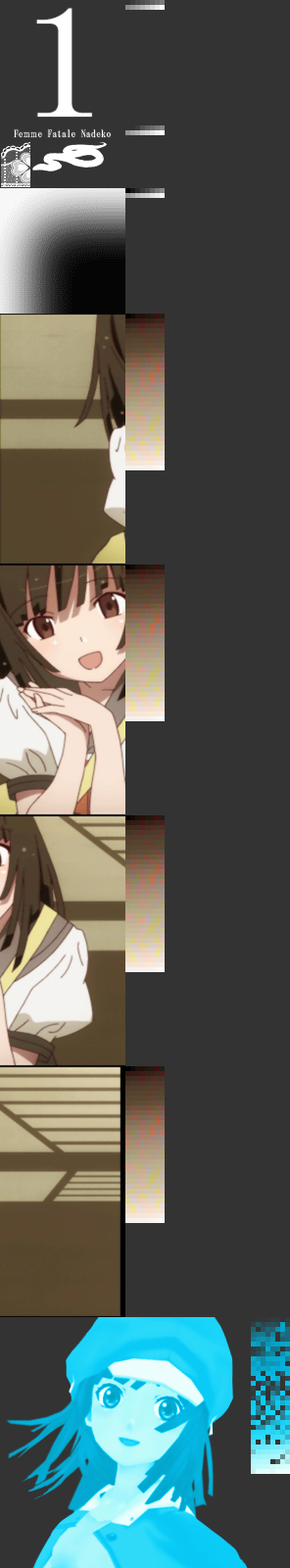
<style>
.page{position:relative;width:290px;height:1568px;background:#333333}
.page>*{position:absolute;margin:0}
.t1{font:147px "HGMinchoB";letter-spacing:0.01em;color:#ffffff}
.t2{font:9.8px "HGMinchoB";letter-spacing:0.01em;color:#ffffff}
.t3{font:9.8px "HGMinchoB";letter-spacing:0.075em;color:#ffffff;scale:0.7 1}
</style>
<div class="page">
<p class="t1" style="left:36px;top:8px;width:56px;height:109px">1</p>
<p class="t2" style="left:14px;top:129px;width:97px;height:9px">Fe<span class="t3">ｍｍ</span>e Fatale Nadeko</p>
</div>
